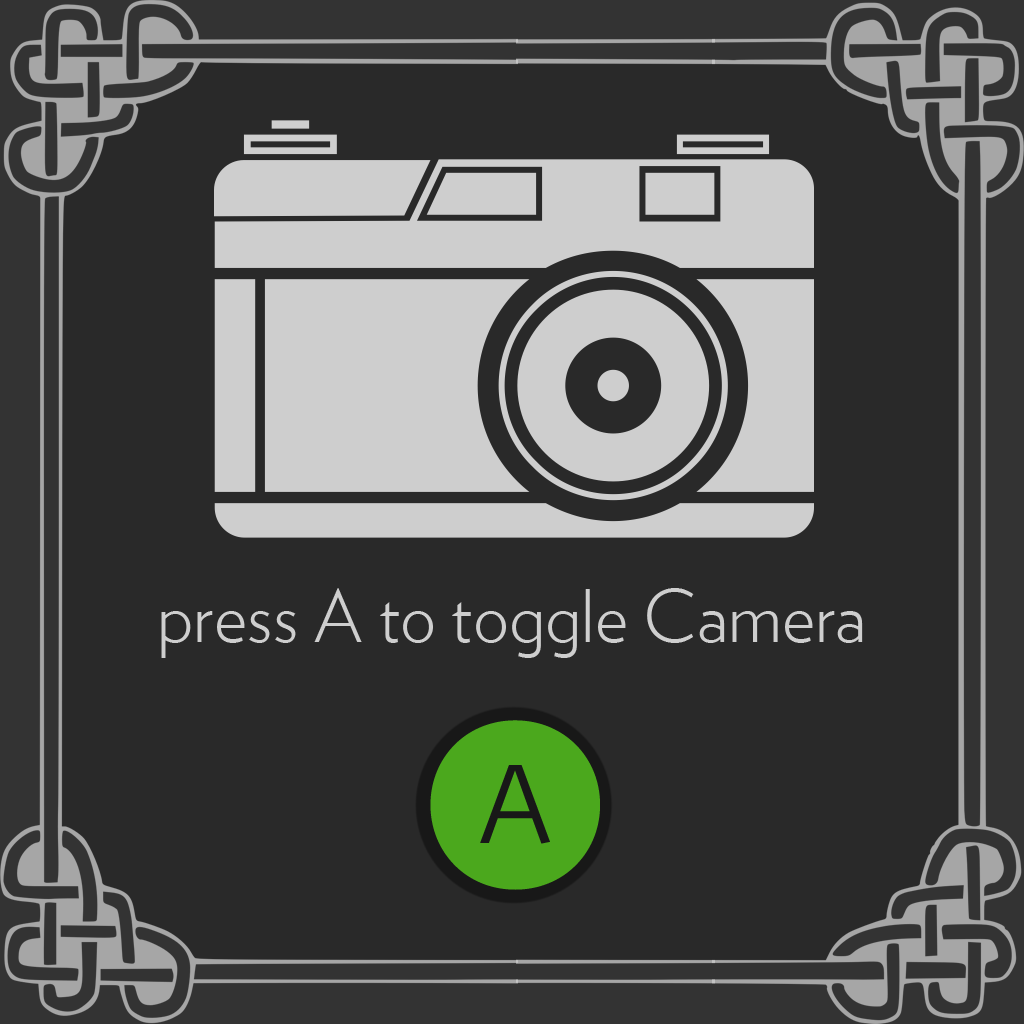
<style>
.page{position:relative;width:1024px;height:1024px;background:#292929}
.page>*{position:absolute;margin:0}
.t1{font:72px "Verlag-Light";color:#cecece}
.t2{font:180px "WhitneyIndexBlack-RoundLt1";color:#50b71d}
</style>
<div class="page">
<p class="t1" style="left:161px;top:588px;width:702px;height:70px">press A to toggle Camera</p>
<p class="t2" style="left:430px;top:720px;width:170px;height:170px;opacity:0.9">A</p>
</div>
